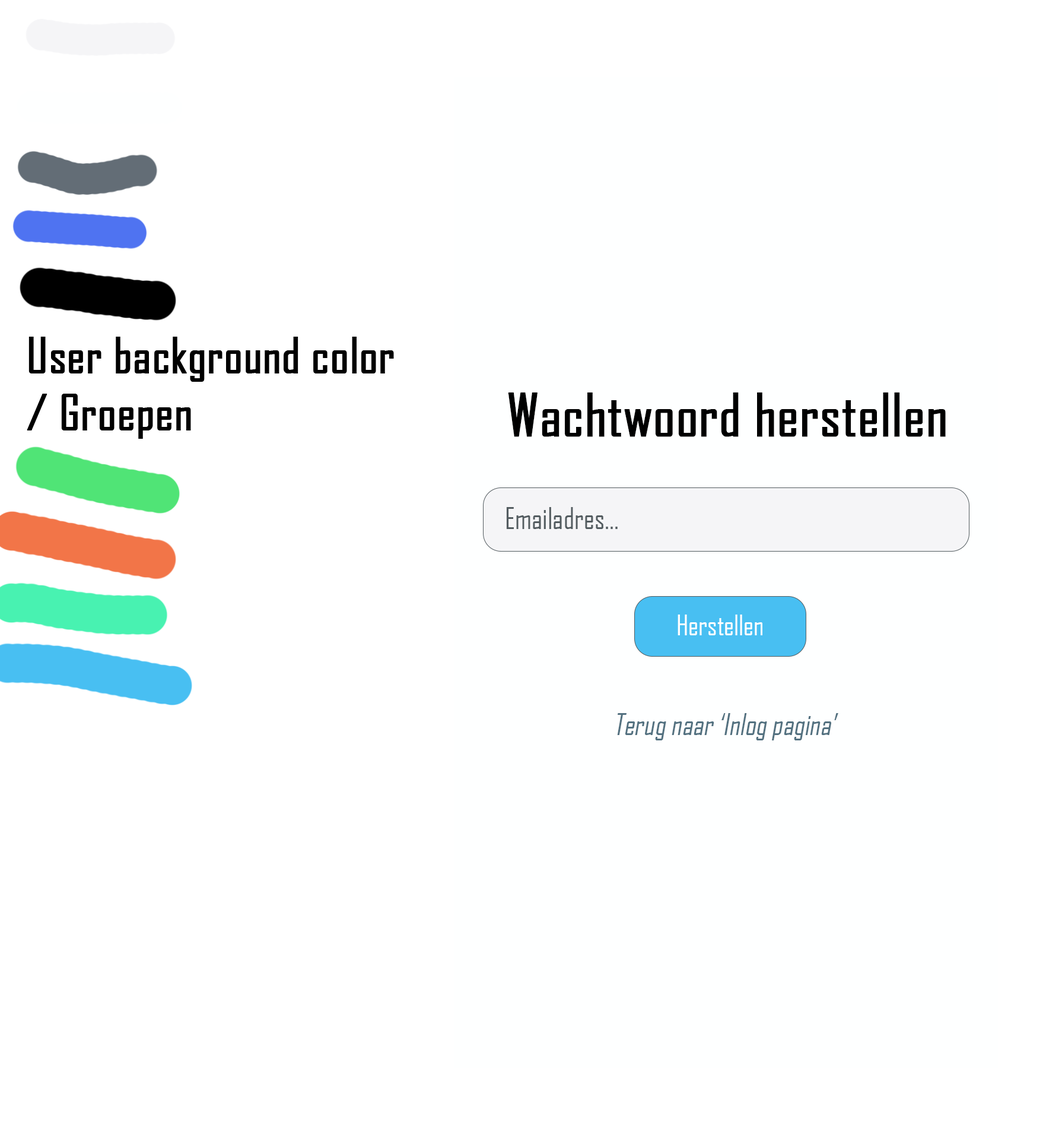
<style>
.page{position:relative;width:1046px;height:1140px;background:#ffffff}
.page>*{position:absolute;margin:0}
.t1{font:47.5px "AgencyFB-Reg";color:#000000;font-weight:bold}
.t2{font:56.4px "AgencyFB-Reg";color:#000000;font-weight:bold}
.t3{font:28.6px "AgencyFB-Reg";color:#535c60}
.t4{font:27.1px "AgencyFB-Reg";color:#ffffff}
.t5{font:28.6px "AgencyFB-Reg";color:#537180;font-style:italic}
</style>
<div class="page">
<p class="t1" style="left:27px;top:337px;width:367px;height:102px">User background color<br>/ Groepen</p>
<p class="t2" style="left:508px;top:392px;width:438px;height:45px">Wachtwoord herstellen</p>
<p class="t3" style="left:506px;top:507px;width:112px;height:22px">Emailadres...</p>
<p class="t4" style="left:678px;top:614px;width:85px;height:21px">Herstellen</p>
<p class="t5" style="left:617px;top:713px;width:222px;height:27px">Terug naar ‘Inlog pagina’</p>
</div>
